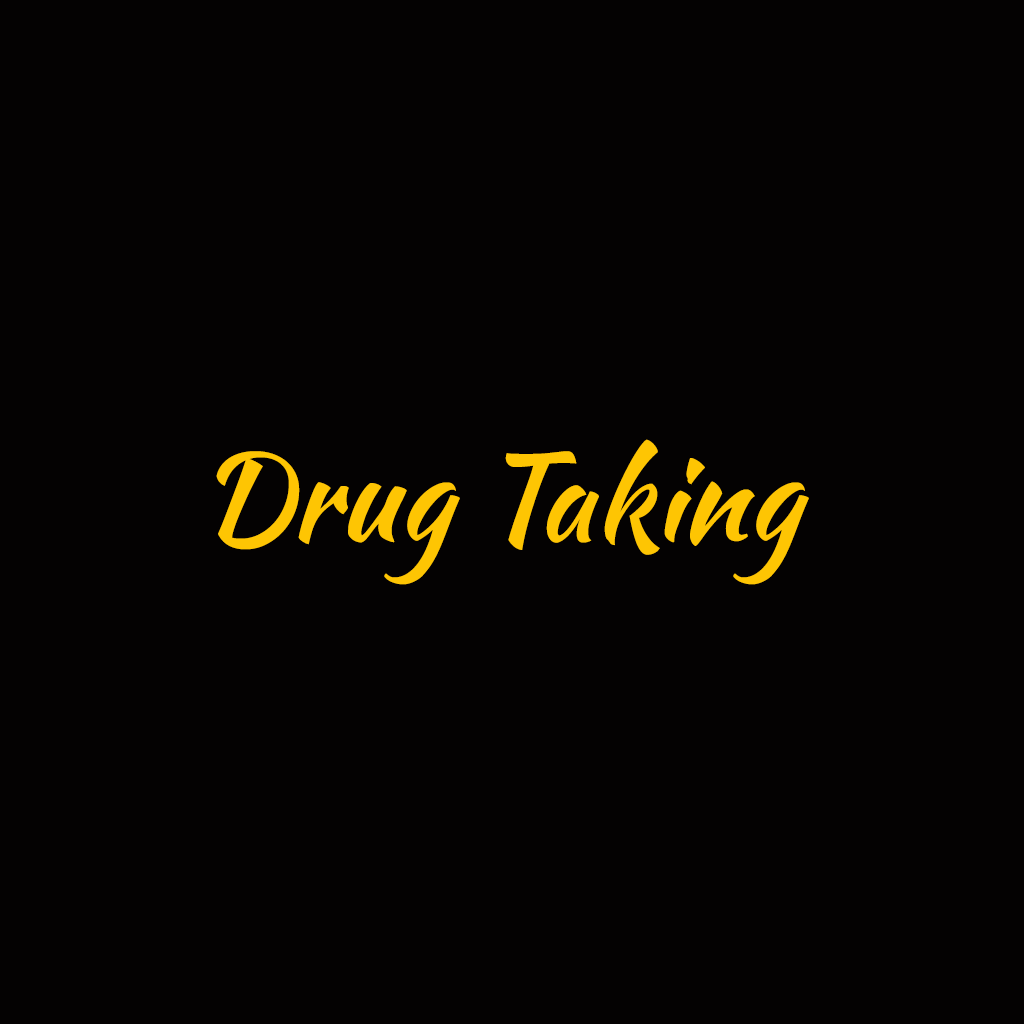
<style>
.page{position:relative;width:1024px;height:1024px;background:#040202}
.page>*{position:absolute;margin:0}
.t1{font:120px "KaushanScript-Regular";color:#fec503}
</style>
<div class="page">
<p class="t1" style="left:216px;top:439px;width:593px;height:146px">Drug Taking</p>
</div>
